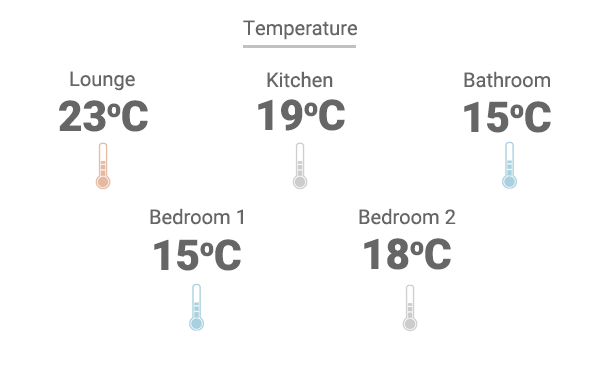
<style>
.page{position:relative;width:600px;height:371px;background:#ffffff}
.page>*{position:absolute;margin:0}
.t1{font:20.1px "Roboto-Regular";color:#666666}
.t2{font:42.3px "Roboto-Black";color:#666666}
</style>
<div class="page">
<p class="t1" style="left:243px;top:20px;width:114px;height:20px">Temperature</p>
<p class="t1" style="left:70px;top:71px;width:65px;height:20px">Lounge</p>
<p class="t1" style="left:267px;top:71px;width:66px;height:17px">Kitchen</p>
<p class="t1" style="left:464px;top:71px;width:86px;height:17px">Bathroom</p>
<p class="t2" style="left:59px;top:100px;width:89px;height:32px">23oC</p>
<p class="t2" style="left:258px;top:99px;width:87px;height:32px">19oC</p>
<p class="t2" style="left:464px;top:101px;width:87px;height:32px">15oC</p>
<p class="t1" style="left:150px;top:208px;width:93px;height:17px">Bedroom 1</p>
<p class="t1" style="left:359px;top:208px;width:97px;height:17px">Bedroom 2</p>
<p class="t2" style="left:154px;top:239px;width:87px;height:32px">15oC</p>
<p class="t2" style="left:364px;top:238px;width:87px;height:32px">18oC</p>
</div>
